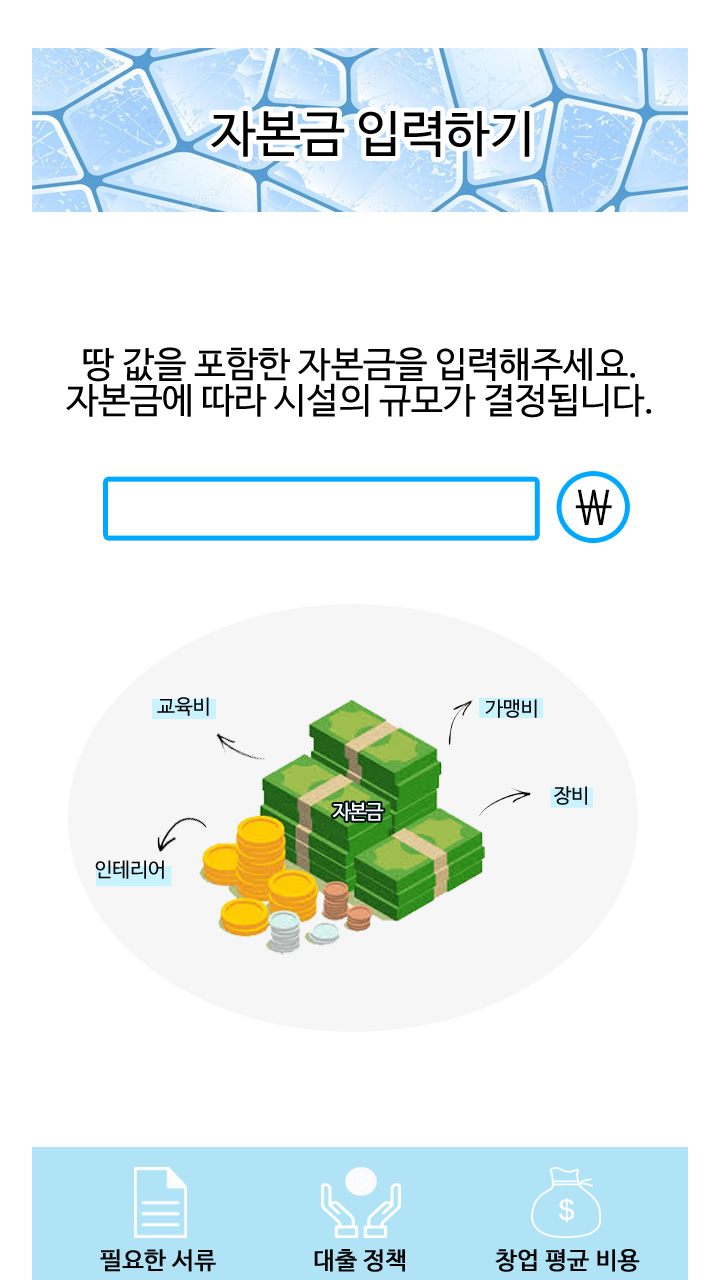
<style>
.page{position:relative;width:720px;height:1280px;background:#ffffff}
.page>*{position:absolute;margin:0}
.t1{font:50px "NanumBarunGothic";color:#000000}
.t2{font:36px/36px "NanumBarunGothic";color:#000000}
.t3{font:49px "MalgunGothic";color:#000000}
.t4{font:20px "NanumBarunGothic";color:#000000}
.t5{font:20px "NanumBarunGothic";letter-spacing:-0.1em;color:#ffffff;font-weight:bold}
.t6{font:24px "NanumBarunGothic";color:#040404;font-weight:bold}
.t7{font:24px "NanumBarunGothic";color:#030303;font-weight:bold}
</style>
<div class="page">
<p class="t1" style="left:211px;top:111px;width:319px;height:46px">자본금 입력하기</p>
<p class="t2" style="left:66px;top:347px;width:586px;height:71px;text-align:center">땅 값을 포함한 자본금을 입력해주세요.<br>자본금에 따라 시설의 규모가 결정됩니다.</p>
<p class="t3" style="left:575px;top:489px;width:37px;height:36px">\</p>
<p class="t4" style="left:157px;top:697px;width:52px;height:19px">교육비</p>
<p class="t4" style="left:485px;top:699px;width:52px;height:19px">가맹비</p>
<p class="t4" style="left:554px;top:786px;width:33px;height:19px">장비</p>
<p class="t5" style="left:332px;top:802px;width:52px;height:19px">자본금</p>
<p class="t4" style="left:95px;top:860px;width:69px;height:19px">인테리어</p>
<p class="t6" style="left:100px;top:1249px;width:116px;height:23px">필요한 서류</p>
<p class="t7" style="left:314px;top:1249px;width:91px;height:23px">대출 정책</p>
<p class="t7" style="left:495px;top:1249px;width:145px;height:23px">창업 평균 비용</p>
</div>
